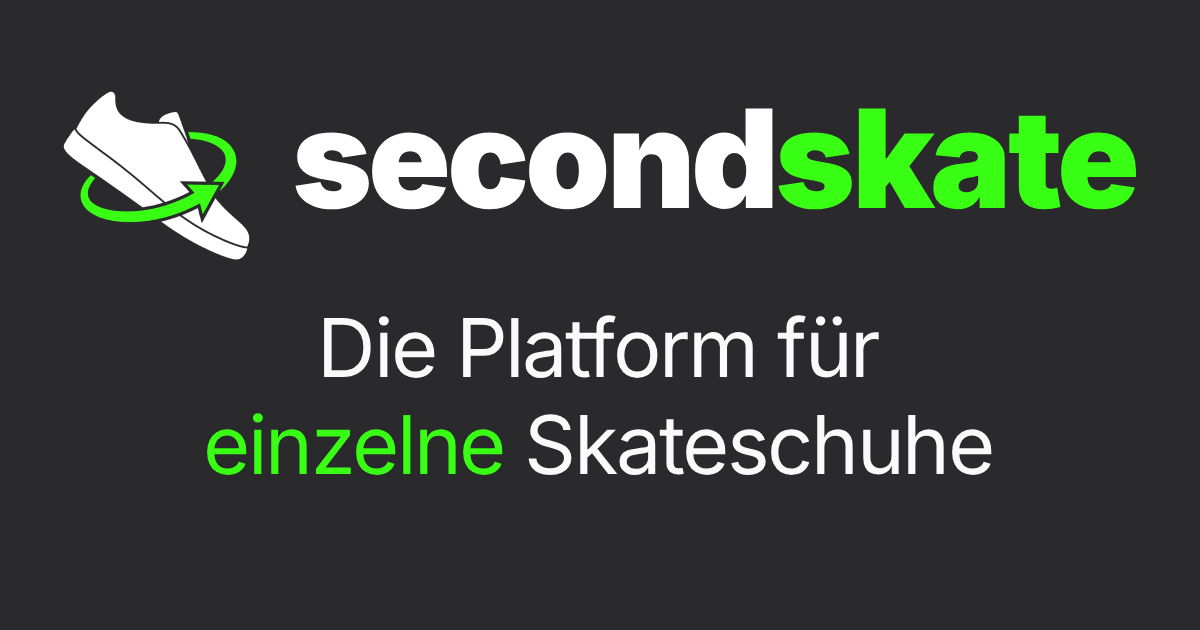
<style>
.page{position:relative;width:1200px;height:630px;background:#2a2a2c}
.page>*{position:absolute;margin:0}
.t1{font:136.6px "Inter-ExtraBold_14.000opsz_900.000wght";letter-spacing:-0.03em;color:#ffffff}
.t2{font:136.6px "Inter-ExtraBold_14.000opsz_900.000wght";letter-spacing:-0.03em;color:#39ff14}
.t3{font:81px "Inter-Regular";letter-spacing:-0.03em;color:#fafafa}
.t4{font:81px "Inter-Regular";letter-spacing:-0.03em;color:#39ff14}
</style>
<div class="page">
<p class="t1" style="left:295px;top:108px;width:841px;height:102px">second<span class="t2">skate</span></p>
<p class="t3" style="left:207px;top:315px;width:785px;height:161px;text-align:center">Die Platform für<br><span class="t4">einzelne </span>Skateschuhe</p>
</div>
